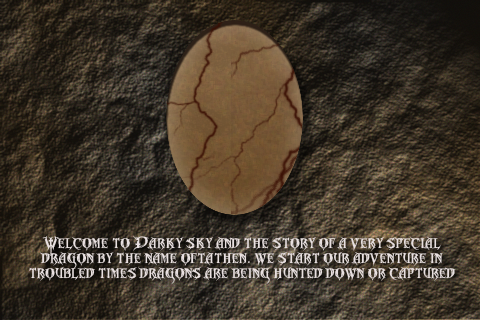
<style>
.page{position:relative;width:480px;height:320px}
.page>*{position:absolute;margin:0}
.t1{font:12.5px "MetalMacabre";color:#e8e0e0}
.t2{font:12.5px "MyriadPro-Regular";color:#e8e0e0}
</style>
<div class="page">
<p class="t1" style="left:29px;top:235px;width:427px;height:49px;text-align:center">Welcome to Darky sky and the story of a very special dragon by the name oftathen<span class="t2">.  </span>we start our adventure in troubled times dragons are being hunted down or captured</p>
</div>
